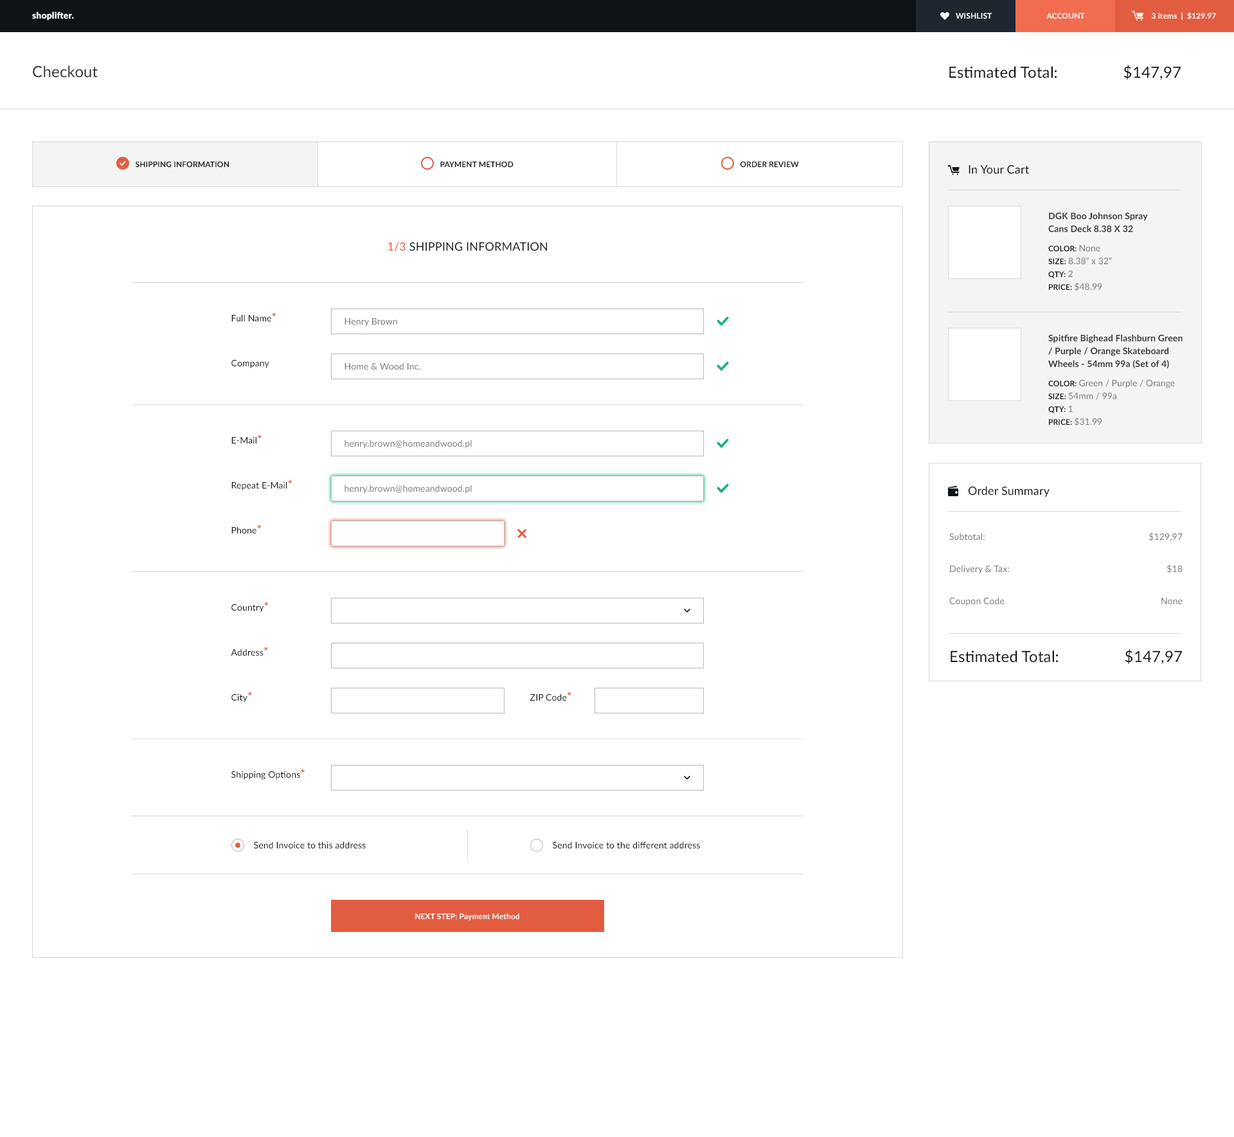
<style>
.page{position:relative;width:1234px;height:1137px;background:#ffffff}
.page>*{position:absolute;margin:0}
.t1{font:9px "Lato-Black";letter-spacing:0.01em;color:#ffffff}
.t2{font:7.7px "Lato-Bold";letter-spacing:0.01em;color:#ffffff;text-transform:uppercase}
.t3{font:7.7px "Lato-Bold";letter-spacing:0.01em;color:#ffffff}
.t4{font:15.4px "Lato-Regular";letter-spacing:0.01em;color:#313131}
.t5{font:15.4px "Lato-Regular";letter-spacing:0.01em;color:#0e1317}
.t6{font:7.7px "Lato-Bold";letter-spacing:0.01em;color:#0e1317;text-transform:uppercase}
.t7{font:11.6px "Lato-Regular";letter-spacing:0.01em;color:#0e1317}
.t8{font:9px/12.9px "Lato-Bold"}
.t9{font:7.7px/19.3px "Lato-Bold";letter-spacing:0.01em;text-transform:uppercase}
.t10{font:9px/12.9px "Lato-Regular"}
.t11{font:7.7px/12.9px "Lato-Bold";letter-spacing:0.01em;text-transform:uppercase}
.t12{font:11.6px "Lato-Regular";letter-spacing:0.01em;color:#0e1317;text-transform:uppercase}
.t13{font:11.6px "Lato-Regular";letter-spacing:0.01em;color:#e25d40;text-transform:uppercase}
.t14{font:9px "Lato-Regular";letter-spacing:0.01em;color:#0e1317}
.t15{font:11.6px "Lato-Bold";letter-spacing:0.01em;color:#e25d40}
.t16{font:9px "Lato-Regular";letter-spacing:0.01em;color:#767676}
.t17{font:9px/12.9px "Lato-Bold";color:#313131}
.t18{font:7.7px/19.3px "Lato-Bold";letter-spacing:0.01em;color:#313131;text-transform:uppercase}
.t19{font:9px/12.9px "Lato-Regular";color:#313131}
.t20{font:7.7px/12.9px "Lato-Bold";letter-spacing:0.01em;color:#313131;text-transform:uppercase}
.t21{font:9px/32.1px "Lato-Regular";letter-spacing:0.01em;color:#767676}
.t22{font:11.6px "Lato-Bold";letter-spacing:0.01em;color:#0e1317}
</style>
<div class="page">
<p class="t1" style="left:32px;top:12px;width:42px;height:9px">shoplifter.</p>
<p class="t2" style="left:956px;top:13px;width:36px;height:6px">wishlist</p>
<p class="t2" style="left:1047px;top:13px;width:38px;height:6px">Account</p>
<p class="t3" style="left:1152px;top:12px;width:64px;height:8px">3 items  |  $129.97</p>
<p class="t4" style="left:33px;top:66px;width:65px;height:12px">Checkout</p>
<p class="t5" style="left:1124px;top:65px;width:57px;height:15px">$147,97</p>
<p class="t5" style="left:950px;top:66px;width:107px;height:12px">Estimated Total:</p>
<p class="t6" style="left:135px;top:161px;width:94px;height:6px">Shipping information</p>
<p class="t6" style="left:440px;top:161px;width:74px;height:6px">payment method</p>
<p class="t6" style="left:741px;top:161px;width:58px;height:6px">order review</p>
<p class="t7" style="left:969px;top:165px;width:60px;height:9px">In Your Cart</p>
<p class="t8" style="left:1049px;top:212px;width:99px;height:79px">DGK Boo Johnson Spray <br>Cans Deck 8.38 X 32<br><span class="t9">COlor: </span><span class="t10">None<br></span><span class="t11">Size: </span><span class="t10">8.38” x 32”<br></span><span class="t11">qty: </span><span class="t10">2<br></span><span class="t11">Price: </span><span class="t10">$48.99</span></p>
<p class="t12" style="left:388px;top:242px;width:159px;height:9px"><span class="t13">1/3</span> Shipping Information</p>
<p class="t14" style="left:231px;top:312px;width:45px;height:9px">Full Name<span class="t15">*</span></p>
<p class="t16" style="left:345px;top:318px;width:52px;height:9px">Henry Brown</p>
<p class="t17" style="left:1049px;top:334px;width:134px;height:92px">Spitfire Bighead Flashburn Green / Purple / Orange Skateboard Wheels - 54mm 99a (Set of 4)<br><span class="t18">COlor: </span><span class="t19">Green / Purple / Orange<br></span><span class="t20">Size: </span><span class="t19">54mm / 99a<br></span><span class="t20">qty: </span><span class="t19">1<br></span><span class="t20">Price: </span><span class="t19">$31.99</span></p>
<p class="t14" style="left:231px;top:359px;width:38px;height:9px">Company</p>
<p class="t16" style="left:345px;top:363px;width:75px;height:7px">Home &amp; Wood Inc.</p>
<p class="t14" style="left:231px;top:435px;width:31px;height:9px">E-Mail<span class="t15">*</span></p>
<p class="t16" style="left:345px;top:440px;width:127px;height:9px">henry.brown@homeandwood.pl</p>
<p class="t14" style="left:231px;top:480px;width:62px;height:11px">Repeat E-Mail<span class="t15">*</span></p>
<p class="t16" style="left:345px;top:485px;width:127px;height:9px">henry.brown@homeandwood.pl</p>
<p class="t7" style="left:968px;top:486px;width:82px;height:11px">Order Summary</p>
<p class="t14" style="left:231px;top:525px;width:31px;height:9px">Phone<span class="t15">*</span></p>
<p class="t21" style="left:950px;top:533px;width:59px;height:73px">Subtotal:<br>Delivery &amp; Tax:<br>Coupon Code</p>
<p class="t21" style="left:1149px;top:532px;width:34px;height:72px;text-align:right">$129,97<br>$18<br>None</p>
<p class="t14" style="left:231px;top:602px;width:38px;height:11px">Country<span class="t15">*</span></p>
<p class="t14" style="left:231px;top:647px;width:37px;height:9px">Address<span class="t22">*</span></p>
<p class="t5" style="left:951px;top:651px;width:107px;height:12px">Estimated Total:</p>
<p class="t5" style="left:1125px;top:649px;width:57px;height:16px">$147,97</p>
<p class="t14" style="left:231px;top:692px;width:21px;height:11px">City<span class="t15">*</span></p>
<p class="t14" style="left:530px;top:692px;width:42px;height:9px">ZIP Code<span class="t15">*</span></p>
<p class="t14" style="left:231px;top:769px;width:74px;height:11px">Shipping Options<span class="t15">*</span></p>
<p class="t14" style="left:254px;top:842px;width:112px;height:7px">Send Invoice to this address</p>
<p class="t14" style="left:553px;top:842px;width:147px;height:7px">Send Invoice to the different address</p>
<p class="t3" style="left:415px;top:914px;width:104px;height:7px"><span class="t2">Next step: </span>Payment Method</p>
</div>
